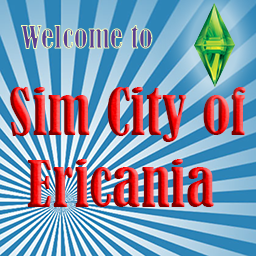
<style>
.page{position:relative;width:256px;height:256px}
.page>*{position:absolute;margin:0}
.t1{font:60px "BernardMT-Condensed"}
</style>
<div class="page">
<p class="t1" style="left:10px;top:87px;width:236px;height:120px">Sim City of <br> Ericania</p>
</div>
